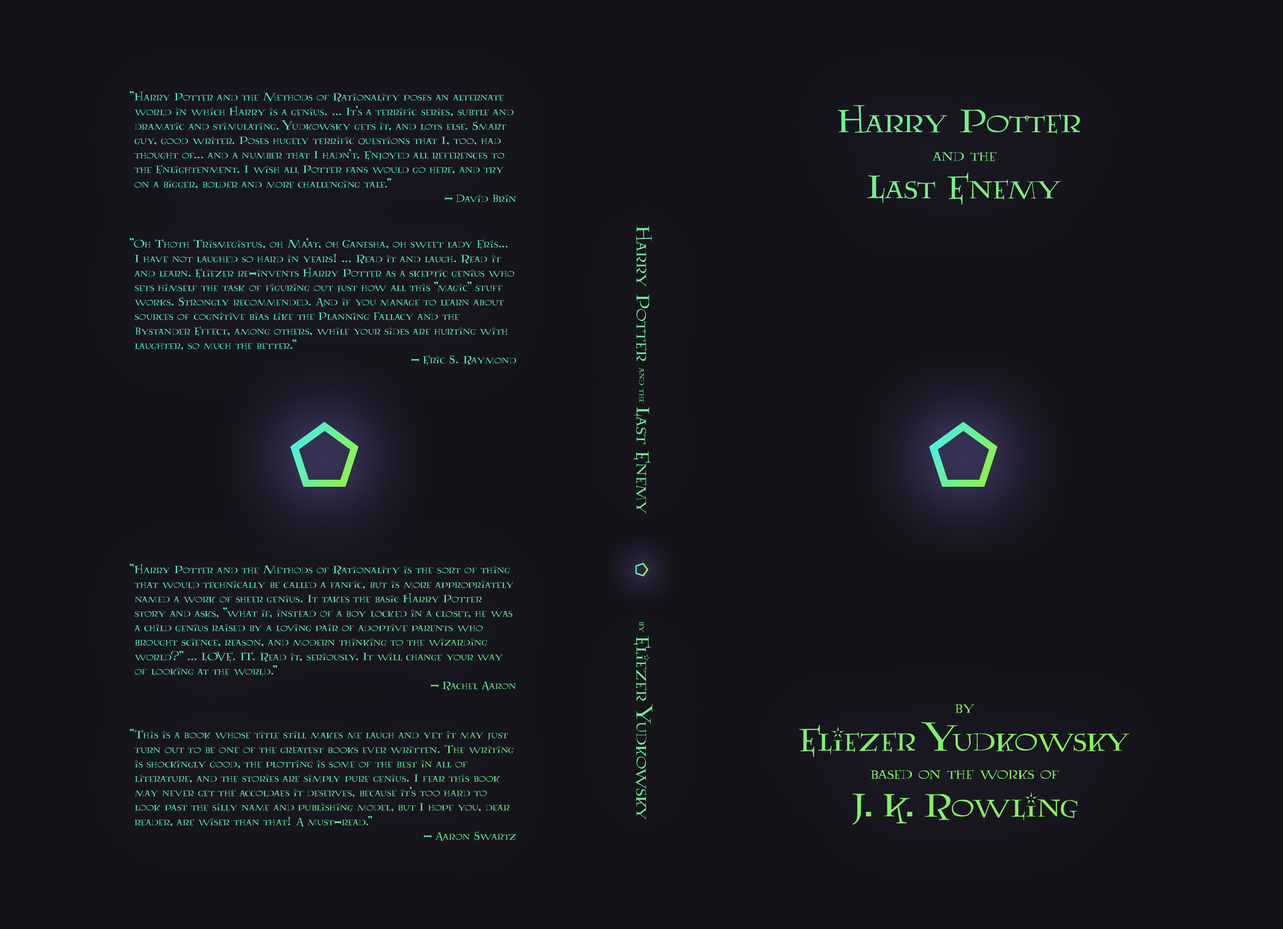
<style>
.page{position:relative;width:1283px;height:929px;background:#141319}
.page>*{position:absolute;margin:0}
.t1{font:12.1px "Lumos";color:#54f0cb}
.t2{font:37.6px/37.6px "Lumos";color:#74f086}
.t3{font:18.4px/28.4px "Lumos";color:#74f086}
.t4{font:20.9px "Lumos";color:#6cf098}
.t5{font:10.2px "Lumos";color:#6cf098}
.t6{font:12.1px "Lumos";color:#57f0c4}
.t7{font:12.1px "Lumos";color:#60f0b1}
.t8{font:20.9px "Lumos";color:#6ff092}
.t9{font:10.2px "Lumos";color:#6ff092}
.t10{font:18.4px/28.4px "Lumos";color:#84f062}
.t11{font:18.4px/515px "Lumos";color:#84f062}
.t12{font:37.6px/37.6px "Lumos";color:#84f062}
.t13{font:12.1px "Lumos";color:#65f0a7}
</style>
<div class="page">
<p class="t1" style="left:130px;top:91px;width:386px;height:111px">"Harry Potter and the Methods of Rationality poses an alternate world in which Harry is a genius. ... It's a terrific series, subtle and dramatic and stimulating. Yudkowsky gets it, and lots else. Smart guy, good writer. Poses hugely terrific questions that I, too, had thought of... and a number that I hadn't. Enjoyed all references to the Enlightenment. I wish all Potter fans would go here, and try on a bigger, bolder and more challenging tale."<br>_ David Brin</p>
<p class="t2" style="left:838px;top:105px;width:242px;height:100px;text-align:center">Harry Potter <br><span class="t3">and the<br></span>Last Enemy</p>
<p class="t4" style="left:633px;top:226px;width:19px;height:288px;rotate:90deg">Harry Potter <span class="t5">and the </span>Last Enemy</p>
<p class="t6" style="left:130px;top:238px;width:386px;height:128px">"Oh Thoth Trismegistus, oh Ma'at, oh Ganesha, oh sweet lady Eris... I have not laughed so hard in years! ... Read it and laugh. Read it and learn. Eliezer re-invents Harry Potter as a skeptic genius who sets himself the task of figuring out just how all this "magic" stuff works. Strongly recommended. And if you manage to learn about sources of cognitive bias like the Planning Fallacy and the Bystander Effect, among others, while your sides are hurting with laughter, so much the better."<br>_ Eric S. Raymond</p>
<p class="t7" style="left:130px;top:564px;width:386px;height:126px">"Harry Potter and the Methods of Rationality is the sort of thing that would technically be called a fanfic, but is more appropriately named a work of sheer genius. It takes the basic Harry Potter story and asks, "what if, instead of a boy locked in a closet, he was a child genius raised by a loving pair of adoptive parents who brought science, reason, and modern thinking to the wizarding world?" ... LOVE. IT. Read it, seriously. It will change your way of looking at the world."<br>_ Rachel Aaron</p>
<p class="t8" style="left:633px;top:621px;width:20px;height:199px;rotate:90deg"><span class="t9">by </span>Eliezer Yudkowsky</p>
<p class="t10" style="left:799px;top:705px;width:331px;height:120px;text-align:center"><span class="t11">by<br></span><span class="t12">Eliezer Yudkowsky<br></span>based on the works of<br><span class="t12">J. K. Rowling</span></p>
<p class="t13" style="left:130px;top:729px;width:386px;height:112px">"This is a book whose title still makes me laugh and yet it may just turn out to be one of the greatest books ever written. The writing is shockingly good, the plotting is some of the best in all of literature, and the stories are simply pure genius. I fear this book may never get the accoldaes it deserves, because it's too hard to look past the silly name and publishing model, but I hope you, dear reader, are wiser than that! A must-read."<br>_ Aaron Swartz</p>
</div>
